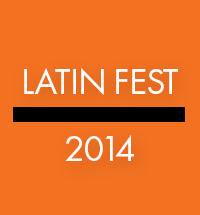
<style>
.page{position:relative;width:200px;height:215px;background:#f37121}
.page>*{position:absolute;margin:0}
.t1{font:37.5px/33.3px "FuturaPT-Book";letter-spacing:-0.025em;color:#ffffff;text-transform:uppercase}
</style>
<div class="page">
<p class="t1" style="left:24px;top:68px;width:154px;height:93px;text-align:center">latin fest<br><br>2014</p>
</div>
